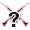
<style>
.page{position:relative;width:30px;height:30px;background:#ffffff}
.page>*{position:absolute;margin:0}
.t1{font:21px "HelveticaNeue-Bold";color:#1c1c1c}
</style>
<div class="page">
<p class="t1" style="left:8px;top:12px;width:11px;height:15px">?</p>
</div>
